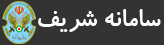
<style>
.page{position:relative;width:164px;height:45px;background:#333333}
.page>*{position:absolute;margin:0}
.t1{font:28px "KoodakBold";color:#fffefe}
</style>
<div class="page">
<p class="t1" style="left:38px;top:9px;width:123px;height:23px">سامانه شریف</p>
</div>
